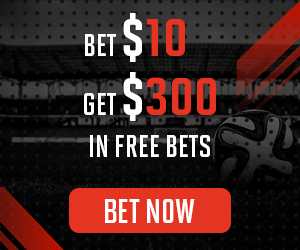
<style>
.page{position:relative;width:300px;height:250px}
.page>*{position:absolute;margin:0}
.t1{font:31px "SolanoGothicMVBPro-Bd";color:#ffffff}
.t2{font:62px "SolanoGothicMVBPro-Bd";color:#ffffff}
.t3{font:62px "SolanoGothicMVBPro-Bd";color:#e63422}
.t4{font:33.6px "SolanoGothicMVBPro-Bd";color:#ffffff}
</style>
<div class="page">
<p class="t1" style="left:85px;top:13px;width:100px;height:49px">BET <span class="t2">$</span><span class="t3">10</span></p>
<p class="t1" style="left:84px;top:72px;width:132px;height:49px">GET <span class="t2">$</span><span class="t3">300</span></p>
<p class="t1" style="left:90px;top:135px;width:120px;height:22px">IN FREE BETS</p>
<p class="t4" style="left:105px;top:199px;width:90px;height:24px">BET NOW</p>
</div>
